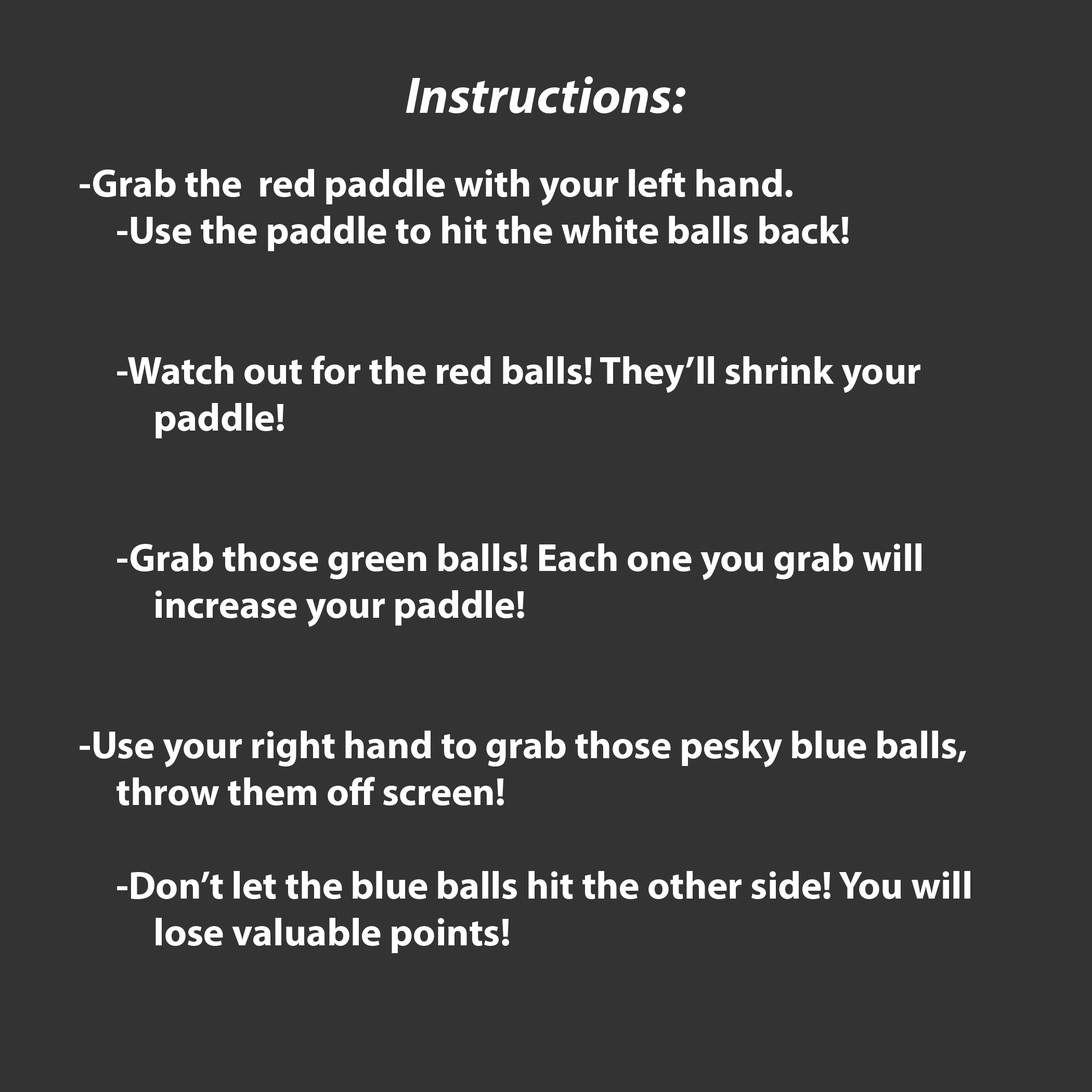
<style>
.page{position:relative;width:1092px;height:1092px;background:#333333}
.page>*{position:absolute;margin:0}
.t1{font:52px "MyriadPro-BoldIt";color:#ffffff}
.t2{font:39px "MyriadPro-Bold";color:#ffffff}
</style>
<div class="page">
<p class="t1" style="left:406px;top:76px;width:279px;height:37px">Instructions:</p>
<p class="t2" style="left:80px;top:168px;width:890px;height:785px">-Grab the  red paddle with your left hand.<br>  -Use the paddle to hit the white balls back!<br>  <br>  <br>  -Watch out for the red balls! They’ll shrink your <br>     paddle!<br><br><br>  -Grab those green balls! Each one you grab will<br>    increase your paddle!<br><br><br>-Use your right hand to grab those pesky blue balls,<br>  throw them off screen!<br><br>  -Don’t let the blue balls hit the other side! You will <br>    lose valuable points!</p>
</div>
